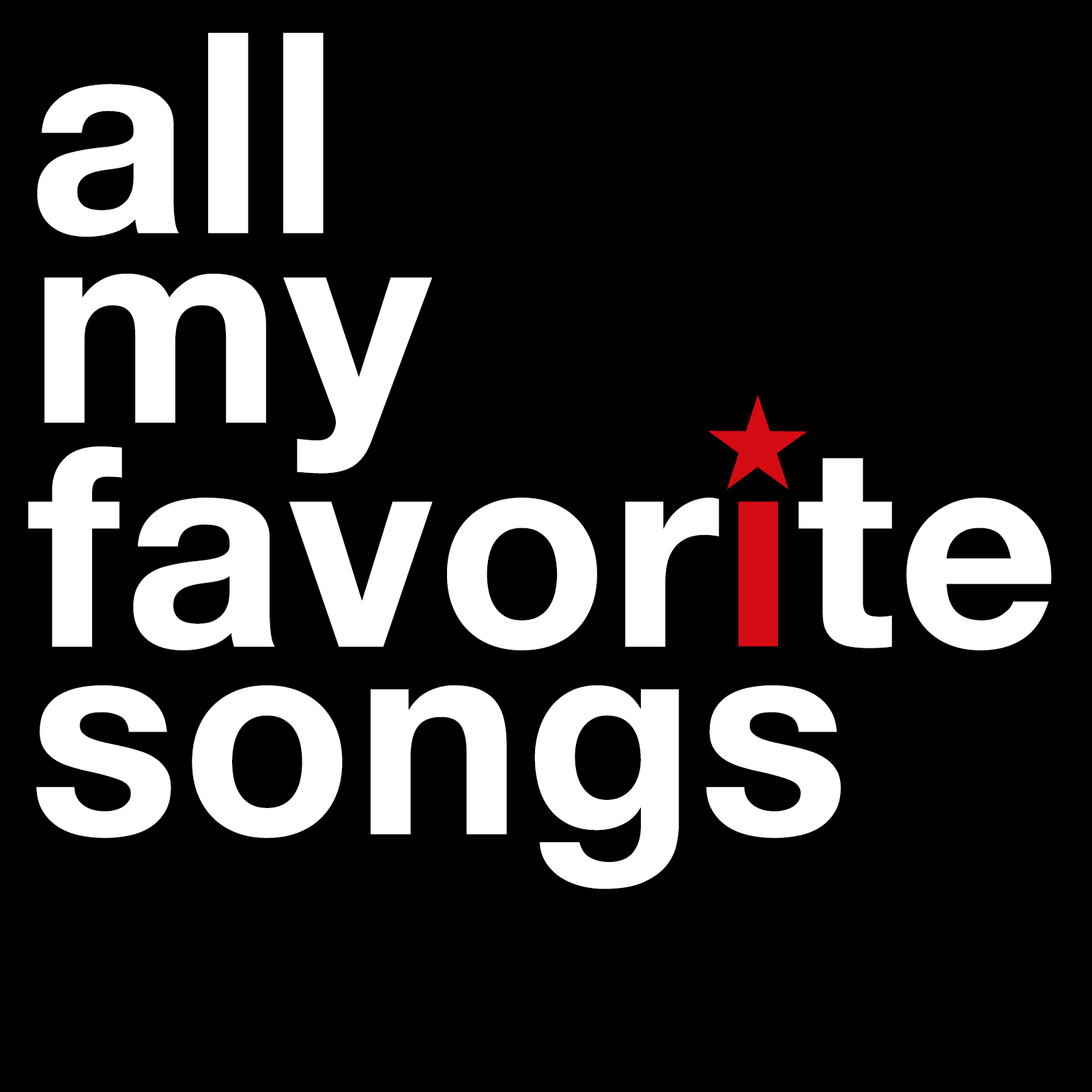
<style>
.page{position:relative;width:1092px;height:1092px;background:#000000}
.page>*{position:absolute;margin:0}
.t1{font:280px/224px "HelveticaNeue-Bold";letter-spacing:0.01em;color:#ffffff}
.t2{font:280px/189.5px "HelveticaNeue-Bold";letter-spacing:0.01em;color:#ffffff}
.t3{font:280px/187.6px "HelveticaNeue-Bold";letter-spacing:0.01em;color:#ffffff}
.t4{font:174px "AppleSymbols";letter-spacing:0.01em;color:#d40b13}
</style>
<div class="page">
<p class="t1" style="left:28px;top:33px;width:1024px;height:856px">all <br><span class="t2">my<br></span>favor te<br><span class="t3">songs</span></p>
<p class="t4" style="left:708px;top:395px;width:99px;height:94px">★</p>
</div>
